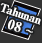
<style>
.page{position:relative;width:42px;height:43px;background:#333333}
.page>*{position:absolute;margin:0}
.t1{font:11px/14px "RyuminPro-ExBold";letter-spacing:-0.08em;color:#ffffff;font-weight:bold}
.t2{font:13px/14px "RyuminPro-ExBold";color:#ffffff;font-weight:bold}
.t3{font:13px/14px "WineArial";color:#ffffff;font-weight:bold}
</style>
<div class="page">
<p class="t1" style="left:0px;top:3px;width:41px;height:30px;text-align:center;rotate:19deg">Tahunan<br><span class="t2">  08 </span><span class="t3">~</span></p>
</div>
